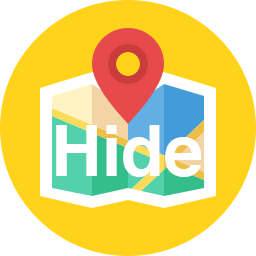
<style>
.page{position:relative;width:256px;height:256px;background:#ffd31c}
.page>*{position:absolute;margin:0}
.t1{font:70px "Helvetica-Bold";color:#ffffff}
</style>
<div class="page">
<p class="t1" style="left:56px;top:125px;width:146px;height:52px">Hide</p>
</div>
